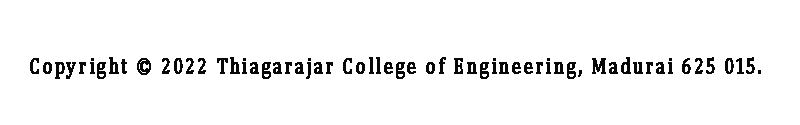
<style>
.page{position:relative;width:800px;height:125px;background:#ffffff}
.page>*{position:absolute;margin:0}
.t1{font:22.6px "Cambria";letter-spacing:0.1em;color:#080808;font-weight:bold;scale:0.81 1}
</style>
<div class="page">
<p class="t1" style="left:30px;top:57px;width:731px;height:22px">Copyright © 2022 Thiagarajar College of Engineering, Madurai 625 015.</p>
</div>
